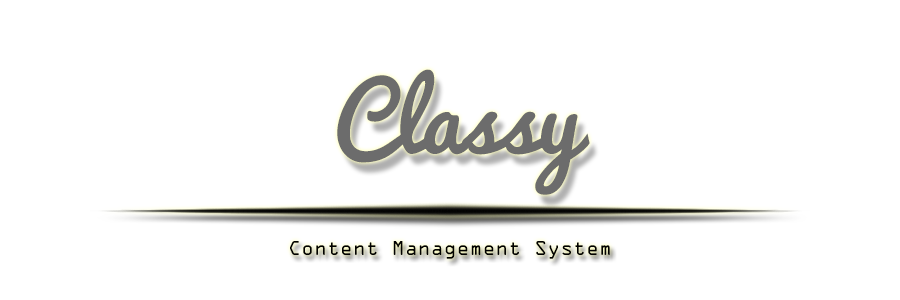
<style>
.page{position:relative;width:900px;height:300px;background:#ffffff}
.page>*{position:absolute;margin:0}
.t1{font:90px "Pacifico-Regular";color:#6c6c6c}
.t2{font:18px "OCRAStd";color:#000000}
</style>
<div class="page">
<p class="t1" style="left:337px;top:69px;width:253px;height:126px">Classy</p>
<p class="t2" style="left:290px;top:241px;width:320px;height:18px">Content Management System</p>
</div>
